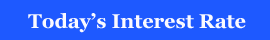
<style>
.page{position:relative;width:270px;height:40px;background:#1e59ff}
.page>*{position:absolute;margin:0}
.t1{font:20px "Georgia-Bold";color:#fbfaff}
</style>
<div class="page">
<p class="t1" style="left:28px;top:13px;width:218px;height:20px">Today’s Interest Rate</p>
</div>
